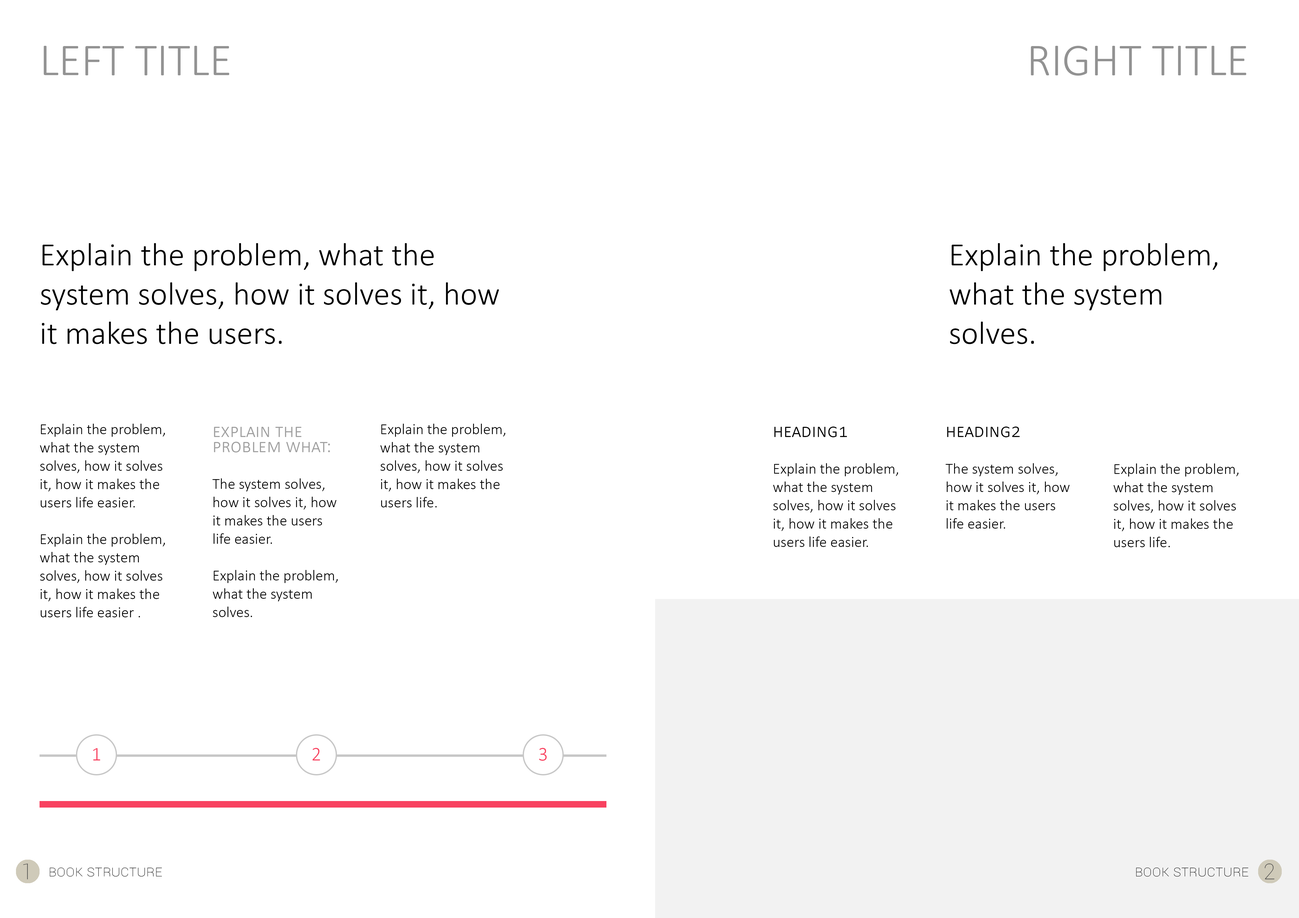
<style>
.page{position:relative;width:1299px;height:918px;background:#ffffff}
.page>*{position:absolute;margin:0}
.t1{font:45.8px "Calibri-Light";color:#939393;text-transform:uppercase}
.t2{font:45.8px "Calibri-Light";color:#929292;text-transform:uppercase}
.t3{font:32.7px "Calibri-Light";color:#000000}
.t4{font:15.3px "Calibri-Light";color:#000000}
.t5{font:19.6px/15.3px "Calibri-Light";color:#9f9f9f;font-variant:small-caps}
.t6{font:19.6px/15.3px "Calibri-Light";color:#000000;font-variant:small-caps}
.t7{font:19.6px "Calibri-Light";color:#f8415f}
.t8{font:21.8px "Roboto-Thin";color:#484848}
.t9{font:15.3px "Roboto-Thin";color:#000000;font-variant:small-caps}
</style>
<div class="page">
<p class="t1" style="left:44px;top:46px;width:185px;height:29px">left title</p>
<p class="t2" style="left:1031px;top:46px;width:215px;height:30px">right title</p>
<p class="t3" style="left:41px;top:243px;width:458px;height:101px">Explain the problem, what the system solves, how it solves it, how it makes the users.</p>
<p class="t3" style="left:949px;top:243px;width:268px;height:101px">Explain the problem, what the system solves.</p>
<p class="t4" style="left:40px;top:424px;width:125px;height:193px">Explain the problem, what the system solves, how it solves it, how it makes the users life easier. <br><br>Explain the problem, what the system solves, how it solves it, how it makes the users life easier .</p>
<p class="t4" style="left:380px;top:424px;width:125px;height:84px">Explain the problem, what the system solves, how it solves it, how it makes the users life.</p>
<p class="t4" style="left:212px;top:427px;width:126px;height:190px"><span class="t5">explain the problem what: <br></span><br>The system solves, how it solves it, how it makes the users life easier. <br><br>Explain the problem, what the system solves.</p>
<p class="t4" style="left:773px;top:427px;width:125px;height:120px"><span class="t6">heading1<br></span><br>Explain the problem, what the system solves, how it solves it, how it makes the users life easier.</p>
<p class="t4" style="left:945px;top:427px;width:124px;height:102px"><span class="t6">heading2<br></span><br>The system solves, how it solves it, how it makes the users life easier.</p>
<p class="t4" style="left:1113px;top:464px;width:125px;height:83px">Explain the problem, what the system solves, how it solves it, how it makes the users life.</p>
<p class="t7" style="left:93px;top:748px;width:7px;height:13px">1</p>
<p class="t7" style="left:312px;top:748px;width:8px;height:13px">2</p>
<p class="t7" style="left:539px;top:748px;width:8px;height:13px">3</p>
<p class="t8" style="left:23px;top:864px;width:5px;height:16px">1</p>
<p class="t9" style="left:50px;top:868px;width:112px;height:9px">Book structure</p>
<p class="t9" style="left:1136px;top:868px;width:112px;height:9px">Book structure</p>
<p class="t8" style="left:1264px;top:864px;width:10px;height:16px">2</p>
</div>
